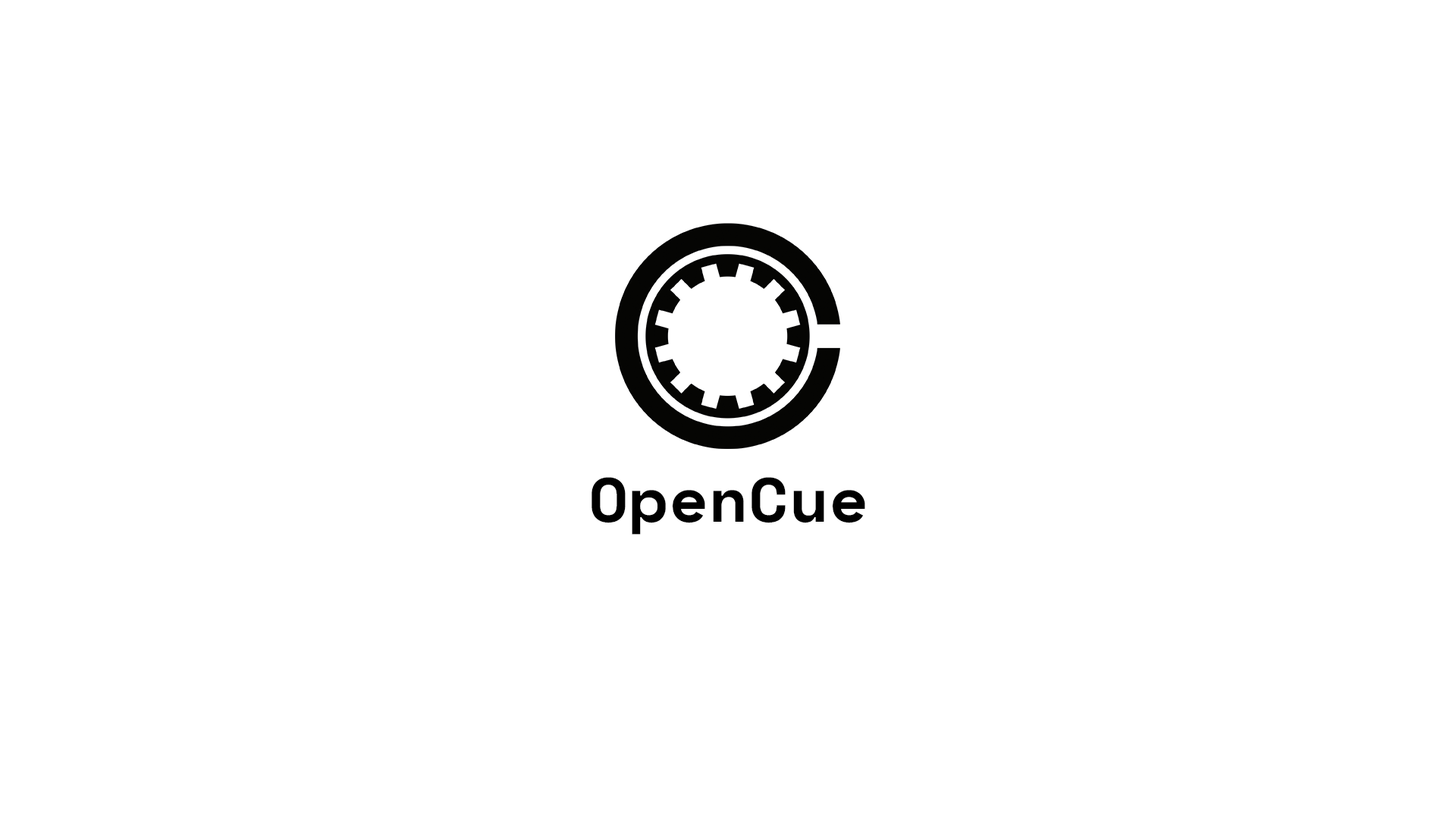
<style>
.page{position:relative;width:1456px;height:819px;background:#ffffff}
.page>*{position:absolute;margin:0}
.t1{font:62.2px "SpaceMono-Bold";color:#000000;scale:1.05 1}
</style>
<div class="page">
<p class="t1" style="left:591px;top:477px;width:274px;height:58px">OpenCue</p>
</div>
